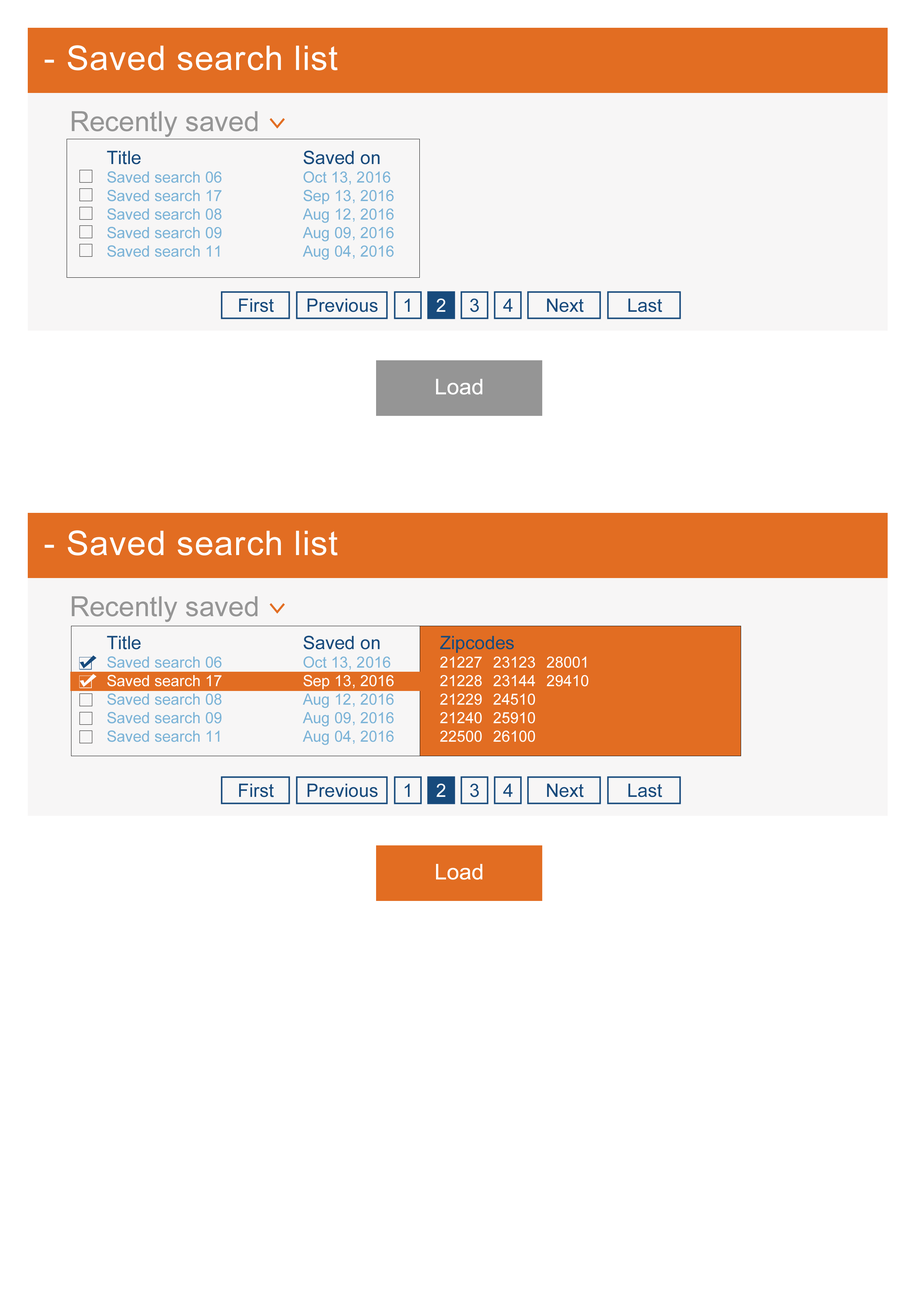
<style>
.page{position:relative;width:918px;height:1299px;background:#ffffff}
.page>*{position:absolute;margin:0}
.t1{font:33.9px "ArialMT";letter-spacing:0.025em;color:#ffffff}
.t2{font:27.8px "ArialMT";color:#959595}
.t3{font:27.8px "Consolas";color:#e26d22}
.t4{font:15.4px "ArialMT";color:#7bb3d7}
.t5{font:18.5px "ArialMT";color:#174a7c}
.t6{font:18.5px "ArialMT";color:#ffffff}
.t7{font:21.6px "ArialMT";color:#ffffff}
.t8{font:15.4px "ArialMT";color:#ffffff}
</style>
<div class="page">
<p class="t1" style="left:44px;top:45px;width:294px;height:25px">- Saved search list</p>
<p class="t2" style="left:72px;top:111px;width:186px;height:26px">Recently saved</p>
<p class="t3" style="left:270px;top:118px;width:15px;height:10px;rotate:90deg">&gt;</p>
<p class="t4" style="left:107px;top:151px;width:115px;height:106px"><span class="t5">Title<br></span>Saved search 06<br>Saved search 17<br>Saved search 08<br>Saved search 09<br>Saved search 11</p>
<p class="t4" style="left:303px;top:150px;width:91px;height:110px"><span class="t5">Saved on<br></span>Oct 13, 2016<br>Sep 13, 2016<br>Aug 12, 2016<br>Aug 09, 2016<br>Aug 04, 2016</p>
<p class="t5" style="left:239px;top:298px;width:35px;height:14px">First</p>
<p class="t5" style="left:308px;top:298px;width:70px;height:14px">Previous</p>
<p class="t5" style="left:405px;top:298px;width:5px;height:14px">1</p>
<p class="t6" style="left:436px;top:298px;width:9px;height:14px">2</p>
<p class="t5" style="left:470px;top:298px;width:9px;height:14px">3</p>
<p class="t5" style="left:503px;top:298px;width:10px;height:14px">4</p>
<p class="t5" style="left:547px;top:298px;width:37px;height:14px">Next</p>
<p class="t5" style="left:628px;top:298px;width:34px;height:14px">Last</p>
<p class="t7" style="left:436px;top:379px;width:46px;height:16px">Load</p>
<p class="t1" style="left:44px;top:530px;width:294px;height:25px">- Saved search list</p>
<p class="t2" style="left:72px;top:596px;width:186px;height:26px">Recently saved</p>
<p class="t3" style="left:270px;top:603px;width:15px;height:10px;rotate:90deg">&gt;</p>
<p class="t4" style="left:107px;top:636px;width:115px;height:106px"><span class="t5">Title<br></span>Saved search 06<br><span class="t8">Saved search 17<br></span>Saved search 08<br>Saved search 09<br>Saved search 11</p>
<p class="t4" style="left:303px;top:635px;width:91px;height:110px"><span class="t5">Saved on<br></span>Oct 13, 2016<br><span class="t8">Sep 13, 2016<br></span>Aug 12, 2016<br>Aug 09, 2016<br>Aug 04, 2016</p>
<p class="t8" style="left:440px;top:636px;width:149px;height:106px"><span class="t5">Zipcodes<br></span>21227 23123 28001<br>21228 23144 29410<br>21229 24510<br>21240 25910<br>22500 26100<br><span class="t4">21228<br>21229<br>21240<br>22500</span></p>
<p class="t5" style="left:239px;top:783px;width:35px;height:14px">First</p>
<p class="t5" style="left:308px;top:783px;width:70px;height:14px">Previous</p>
<p class="t5" style="left:405px;top:783px;width:5px;height:14px">1</p>
<p class="t6" style="left:436px;top:783px;width:9px;height:14px">2</p>
<p class="t5" style="left:470px;top:783px;width:9px;height:14px">3</p>
<p class="t5" style="left:503px;top:783px;width:10px;height:14px">4</p>
<p class="t5" style="left:547px;top:783px;width:37px;height:14px">Next</p>
<p class="t5" style="left:628px;top:783px;width:34px;height:14px">Last</p>
<p class="t7" style="left:436px;top:864px;width:46px;height:16px">Load</p>
</div>
